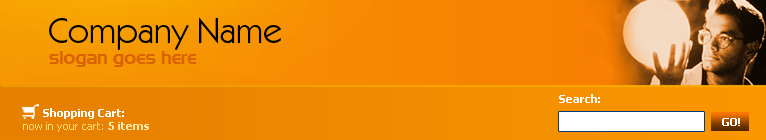
<style>
.page{position:relative;width:766px;height:140px}
.page>*{position:absolute;margin:0}
.t1{font:36px "KabelITCbyBT-Book";color:#010101}
.t2{font:18px "Niamey";color:#da6404}
.t3{font:11px "Tahoma-Bold";color:#fefbfb}
.t4{font:11px "Tahoma-Bold";color:#ffffff}
.t5{font:11px "Tahoma";color:#fed872}
.t6{font:11px "Tahoma";color:#c7c7c7}
.t7{font:11px "Tahoma-Bold";color:#fbe7ac}
.t8{font:11px "Tahoma-Bold";color:#ffffff;text-transform:uppercase}
</style>
<div class="page">
<p class="t1" style="left:49px;top:17px;width:232px;height:33px">Company Name</p>
<p class="t2" style="left:49px;top:51px;width:148px;height:16px">slogan goes here</p>
<p class="t3" style="left:559px;top:94px;width:41px;height:9px">Search:</p>
<p class="t4" style="left:43px;top:108px;width:81px;height:11px">Shopping Cart:</p>
<p class="t5" style="left:23px;top:122px;width:126px;height:10px">now in your cart<span class="t6">: </span><span class="t7">5 items</span></p>
<p class="t8" style="left:722px;top:118px;width:18px;height:8px">GO!</p>
</div>
